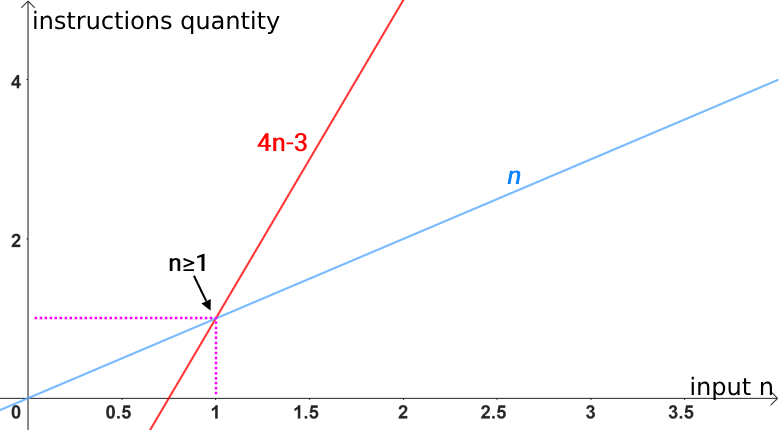
<style>
.page{position:relative;width:780px;height:430px;background:#ffffff}
.page>*{position:absolute;margin:0}
.t1{font:24px "DejaVuSans";color:#000000}
.t2{font:25px "Roboto-Regular";color:#ff0000;font-weight:bold}
.t3{font:25px "Roboto-Regular";color:#0a81ff;font-weight:bold;font-style:italic}
.t4{font:24px "Roboto-Regular";color:#000000;font-weight:bold}
</style>
<div class="page">
<p class="t1" style="left:34px;top:10px;width:246px;height:24px">instructions quantity</p>
<p class="t2" style="left:257px;top:132px;width:50px;height:20px">4n-3</p>
<p class="t3" style="left:507px;top:170px;width:15px;height:14px">n</p>
<p class="t4" style="left:169px;top:253px;width:36px;height:18px">n≥1</p>
<p class="t1" style="left:691px;top:376px;width:81px;height:24px">input n</p>
</div>
